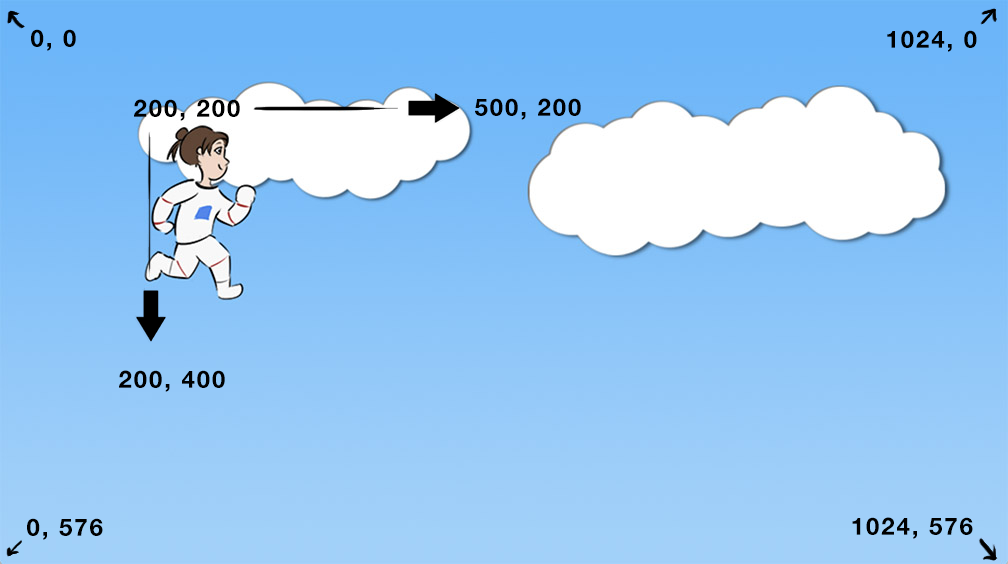
<style>
.page{position:relative;width:1008px;height:564px}
.page>*{position:absolute;margin:0}
.t1{font:24px "HelveticaNeue-Bold";letter-spacing:0.08em;color:#000000}
</style>
<div class="page">
<p class="t1" style="left:31px;top:29px;width:45px;height:22px">0, 0</p>
<p class="t1" style="left:887px;top:30px;width:90px;height:22px">1024, 0</p>
<p class="t1" style="left:134px;top:99px;width:106px;height:22px">200, 200</p>
<p class="t1" style="left:475px;top:98px;width:106px;height:22px">500, 200</p>
<p class="t1" style="left:119px;top:370px;width:106px;height:22px">200, 400</p>
<p class="t1" style="left:27px;top:518px;width:76px;height:22px">0, 576</p>
<p class="t1" style="left:852px;top:517px;width:121px;height:22px">1024, 576</p>
</div>
